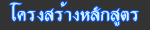
<style>
.page{position:relative;width:150px;height:30px;background:#333333}
.page>*{position:absolute;margin:0}
.t1{font:24px "DSUPaTiMoke";color:#d7effb}
</style>
<div class="page">
<p class="t1" style="left:9px;top:1px;width:130px;height:25px">โครงสร้างหลักสูตร</p>
</div>
